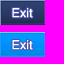
<style>
.page{position:relative;width:64px;height:64px;background:#ff00ff}
.page>*{position:absolute;margin:0}
.t1{font:20px "Kartika";color:#ffffff}
</style>
<div class="page">
<p class="t1" style="left:12px;top:8px;width:21px;height:10px">Exit</p>
<p class="t1" style="left:12px;top:40px;width:21px;height:10px">Exit</p>
</div>
